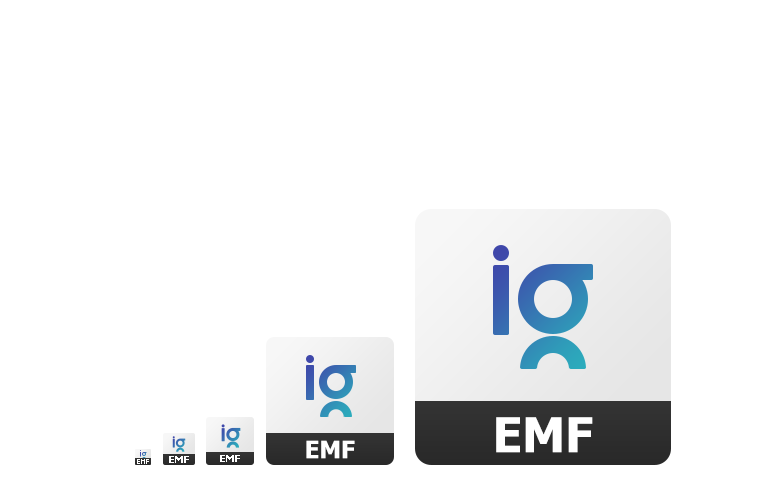
<style>
.page{position:relative;width:768px;height:480px;background:#ffffff}
.page>*{position:absolute;margin:0}
.t1{font:48px "Tahoma-Bold";color:#ffffff}
.t2{font:24px "Tahoma-Bold";color:#ffffff}
.t3{font:10px "Tahoma-Bold";color:#ffffff}
</style>
<div class="page">
<p class="t1" style="left:496px;top:417px;width:97px;height:36px">EMF</p>
<p class="t2" style="left:306px;top:440px;width:49px;height:19px">EMF</p>
<p class="t3" style="left:169px;top:456px;width:20px;height:7px">EMF</p>
<p class="t3" style="left:220px;top:455px;width:20px;height:7px">EMF</p>
</div>
